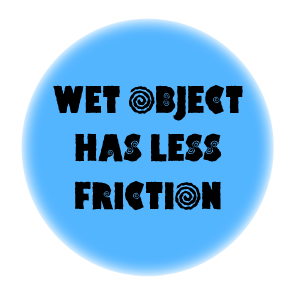
<style>
.page{position:relative;width:300px;height:300px;background:#ffffff}
.page>*{position:absolute;margin:0}
.t1{font:40px "HippoCritic";color:#000000}
</style>
<div class="page">
<p class="t1" style="left:53px;top:85px;width:190px;height:126px;text-align:center">WET OBJECT<br>HAS LESS<br>FRICTION</p>
</div>
